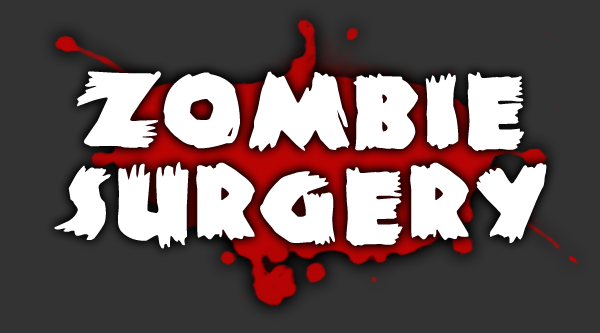
<style>
.page{position:relative;width:600px;height:333px;background:#333333}
.page>*{position:absolute;margin:0}
.t1{font:120px "ZombieA";letter-spacing:0.025em;color:#ffffff;font-weight:bold}
</style>
<div class="page">
<p class="t1" style="left:77px;top:71px;width:447px;height:81px">zombie</p>
<p class="t1" style="left:54px;top:161px;width:493px;height:88px">SURGERY</p>
</div>
